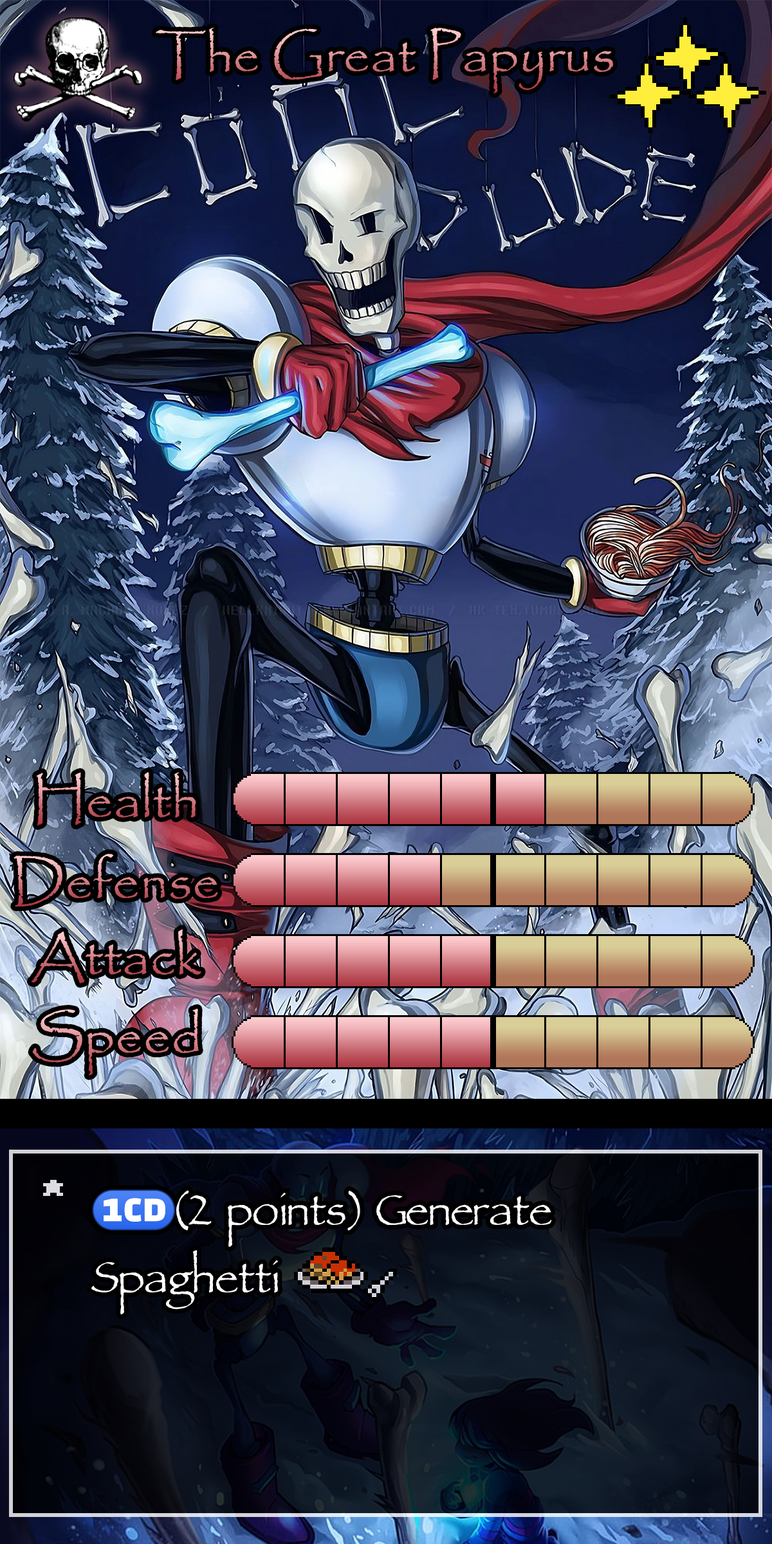
<style>
.page{position:relative;width:772px;height:1544px}
.page>*{position:absolute;margin:0}
.t1{font:90.7px "Papyrus-Regular"}
.t2{font:93.3px "Papyrus-Regular"}
.t3{font:119px "ParchmentMF";color:#ffffff}
.t4{font:71.2px "stoogedings-Regular";color:#ffffff}
</style>
<div class="page">
<p class="t1" style="left:156px;top:28px;width:457px;height:65px">The Great Papyrus</p>
<p class="t2" style="left:36px;top:772px;width:160px;height:54px">Health</p>
<p class="t2" style="left:14px;top:854px;width:204px;height:53px">Defense</p>
<p class="t2" style="left:31px;top:929px;width:170px;height:55px">Attack</p>
<p class="t3" style="left:91px;top:1190px;width:461px;height:125px"><span class="t4">(1CD)</span>(2 points) Generate Spaghetti</p>
</div>
